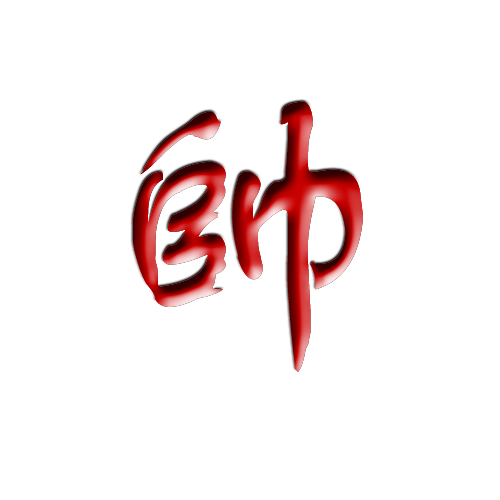
<style>
.page{position:relative;width:500px;height:500px;background:#ffffff}
.page>*{position:absolute;margin:0}
.t1{font:320px "FZSTK--GBK1-0"}
</style>
<div class="page">
<p class="t1" style="left:132px;top:101px;width:231px;height:271px">帥</p>
</div>
